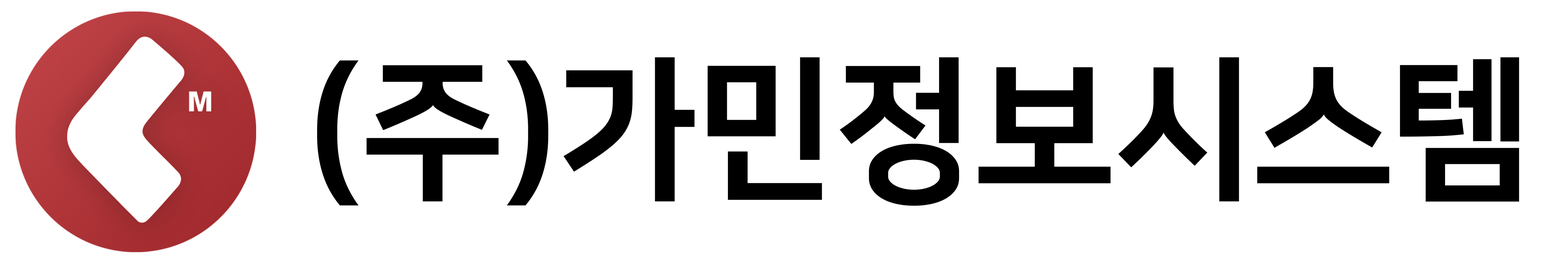
<style>
.page{position:relative;width:1568px;height:271px;background:#ffffff}
.page>*{position:absolute;margin:0}
.t1{font:154.8px "NanumSquareEB";letter-spacing:-0.01em;color:#000000}
</style>
<div class="page">
<p class="t1" style="left:317px;top:57px;width:1202px;height:149px">(주)가민정보시스템</p>
</div>
